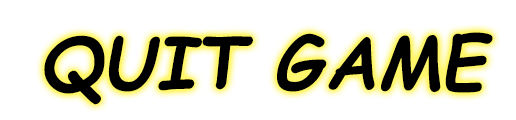
<style>
.page{position:relative;width:516px;height:120px;background:#ffffff}
.page>*{position:absolute;margin:0}
.t1{font:72px "ComicSansMS-BoldItalic";color:#000000}
</style>
<div class="page">
<p class="t1" style="left:44px;top:32px;width:449px;height:73px">QUIT GAME</p>
</div>
